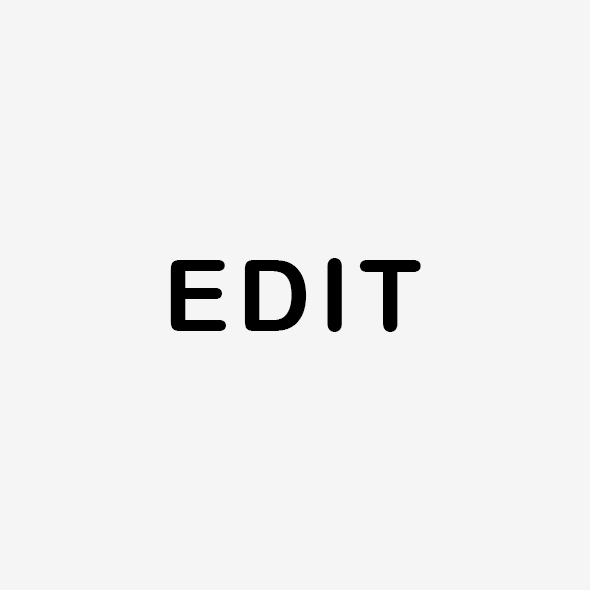
<style>
.page{position:relative;width:590px;height:590px;background:#f5f5f5}
.page>*{position:absolute;margin:0}
.t1{font:100px "ArialRoundedMTBold";letter-spacing:0.08em;color:#000000}
</style>
<div class="page">
<p class="t1" style="left:170px;top:258px;width:251px;height:74px">EDIT</p>
</div>
